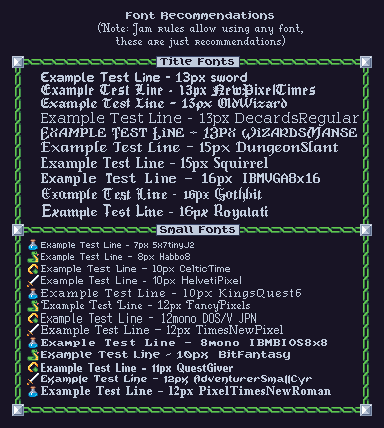
<style>
.page{position:relative;width:384px;height:428px;background:#181425}
.page>*{position:absolute;margin:0}
.t1{font:16px "Bitfantasy";color:#c0cbdc}
.t2{font:16px/13px "FancyPixels";color:#c0cbdc}
.t3{font:16px "Bitfantasy";color:#181425}
.t4{font:16px "sword";color:#c0cbdc}
.t5{font:16px "NewPixelTimes";color:#c0cbdc}
.t6{font:16px "OldWizard";color:#c0cbdc}
.t7{font:16px "DeckardsRegularS";color:#c0cbdc}
.t8{font:16px "WizardsManse";color:#c0cbdc}
.t9{font:15px "DungeonSlant";color:#c0cbdc}
.t10{font:16px "Squirrel";color:#c0cbdc}
.t11{font:16px "Mx437_IBM_VGA_8x16";color:#c0cbdc}
.t12{font:16px "Gothbit";color:#c0cbdc}
.t13{font:16px "Royalati";color:#c0cbdc}
.t14{font:7px "5x7tinyJ2";color:#c0cbdc}
.t15{font:8px "Habbo8";color:#c0cbdc}
.t16{font:16px "CelticTime";color:#c0cbdc}
.t17{font:16px "HelvetiPixel";color:#c0cbdc}
.t18{font:16px "KingsQuest6";color:#c0cbdc}
.t19{font:16px "FancyPixels";color:#c0cbdc}
.t20{font:12px "Mx437_DOS-V_re._JPN12";color:#c0cbdc}
.t21{font:16px "TimesNewPixel";color:#c0cbdc}
.t22{font:8px "Mx437_IBM_BIOS";color:#c0cbdc}
.t23{font:16px "Questgiver";color:#c0cbdc}
.t24{font:16px "AdventurerSmallC";color:#c0cbdc}
.t25{font:16px "PixelTimesNewRom";color:#c0cbdc}
</style>
<div class="page">
<p class="t1" style="left:126px;top:11px;width:148px;height:9px">Font Recommendations</p>
<p class="t2" style="left:98px;top:22px;width:205px;height:26px;text-align:center">(Note: Jam rules allow using any font,<br>these are just recommendations)</p>
<p class="t3" style="left:160px;top:57px;width:74px;height:9px">Title Fonts</p>
<p class="t4" style="left:41px;top:72px;width:206px;height:13px">Example Test Line - 13px sword</p>
<p class="t5" style="left:41px;top:84px;width:274px;height:13px">Example Test Line - 13px NewPixelTimes</p>
<p class="t6" style="left:41px;top:98px;width:246px;height:13px">Example Test Line - 13px OldWizard</p>
<p class="t7" style="left:41px;top:112px;width:318px;height:14px">Example Test Line - 13px DecardsRegular</p>
<p class="t8" style="left:41px;top:127px;width:316px;height:13px">Example Test Line - 13px WizardsManse</p>
<p class="t9" style="left:41px;top:141px;width:297px;height:15px">Example Test Line - 15px DungeonSlant</p>
<p class="t10" style="left:41px;top:157px;width:227px;height:15px">Example Test Line - 15px Squirrel</p>
<p class="t11" style="left:41px;top:173px;width:279px;height:13px">Example Test Line - 16px IBMVGA8x16</p>
<p class="t12" style="left:42px;top:187px;width:220px;height:16px">Example Test Line - 16px Gothbit</p>
<p class="t13" style="left:42px;top:204px;width:226px;height:16px">Example Test Line - 16px Royalati</p>
<p class="t3" style="left:160px;top:226px;width:75px;height:8px">Small Fonts</p>
<p class="t14" style="left:41px;top:242px;width:153px;height:7px">Example Test Line - 7px 5x7tinyJ2</p>
<p class="t15" style="left:41px;top:253px;width:149px;height:8px">Example Test Line - 8px Habbo8</p>
<p class="t16" style="left:41px;top:265px;width:189px;height:10px">Example Test Line - 10px CelticTime</p>
<p class="t17" style="left:41px;top:276px;width:200px;height:10px">Example Test Line - 10px HelvetiPixel</p>
<p class="t18" style="left:41px;top:289px;width:260px;height:10px">Example Test Line - 10px KingsQuest6</p>
<p class="t19" style="left:41px;top:300px;width:209px;height:12px">Example Test Line - 12px FancyPixels</p>
<p class="t20" style="left:41px;top:313px;width:215px;height:11px">Example Test Line - 12mono DOS/V JPN</p>
<p class="t21" style="left:41px;top:325px;width:242px;height:12px">Example Test Line - 12px TimesNewPixel</p>
<p class="t22" style="left:41px;top:339px;width:286px;height:8px">Example Test Line - 8mono IBMBIOS8x8</p>
<p class="t1" style="left:41px;top:350px;width:249px;height:10px">Example Test Line - 10px  BitFantasy</p>
<p class="t23" style="left:41px;top:363px;width:192px;height:11px">Example Test Line - 11px QuestGiver</p>
<p class="t24" style="left:41px;top:374px;width:271px;height:12px">Example Test Line - 12px AdventurerSmallCyr</p>
<p class="t25" style="left:41px;top:386px;width:290px;height:12px">Example Test Line <span class="t16">-</span> 12px PixelTimesNewRoman</p>
</div>
